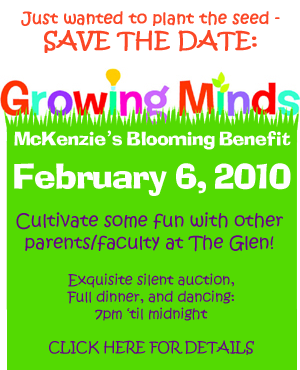
<style>
.page{position:relative;width:300px;height:370px;background:#53da02}
.page>*{position:absolute;margin:0}
.t1{font:16px/24px "KristenITC-Regular";color:#fb4726;font-weight:bold}
.t2{font:22px/24px "KristenITC-Regular";color:#fb4726;font-weight:bold}
.t3{font:20px "ACTION-Normal";color:#ffffff}
.t4{font:20px "ArialRoundedMTBold";color:#ffffff}
.t5{font:36px "ACTION-Normal";color:#ffffff}
.t6{font:18px "KristenITC-Regular";color:#670189}
.t7{font:14px "KristenITC-Regular";color:#670189}
</style>
<div class="page">
<p class="t1" style="left:21px;top:11px;width:259px;height:42px;text-align:center">Just wanted to plant the seed -<br><span class="t2">SAVE THE DATE:</span></p>
<p class="t3" style="left:14px;top:130px;width:277px;height:66px;text-align:center">McKenzie<span class="t4">’</span>s Blooming Benefit<br><span class="t5">February 6, 2010</span></p>
<p class="t6" style="left:16px;top:212px;width:267px;height:40px;text-align:center">Cultivate some fun with other<br>parents/faculty at The Glen!</p>
<p class="t7" style="left:49px;top:273px;width:205px;height:82px;text-align:center">Exquisite silent auction,<br>Full dinner, and dancing:<br>7pm ‘til midnight<br><br>CLICK HERE FOR DETAILS</p>
</div>
